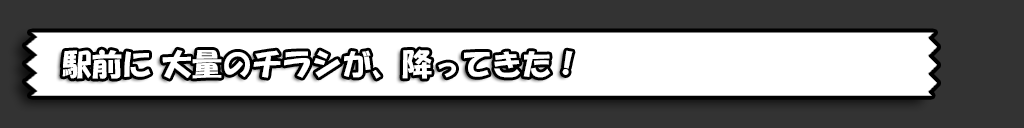
<style>
.page{position:relative;width:1024px;height:128px;background:#333333}
.page>*{position:absolute;margin:0}
.t1{font:30px "HGSSoeiKakupoptai";color:#ffffff}
</style>
<div class="page">
<p class="t1" style="left:62px;top:49px;width:511px;height:30px">駅前に 大量のチラシが、降ってきた！</p>
</div>
